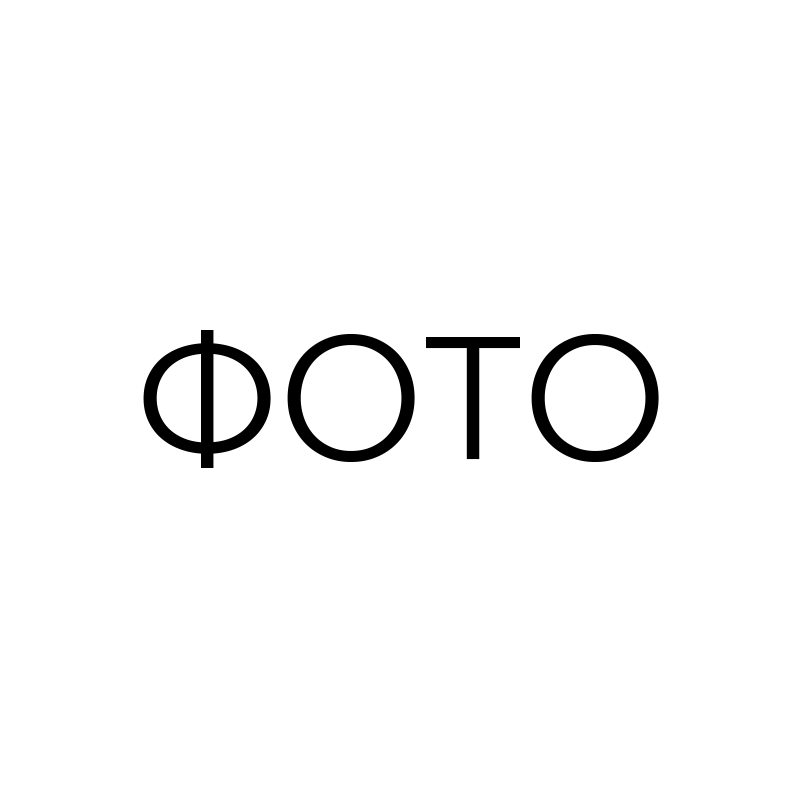
<style>
.page{position:relative;width:800px;height:800px;background:#ffffff}
.page>*{position:absolute;margin:0}
.t1{font:171.5px "AvenirNext-Regular";color:#000000}
</style>
<div class="page">
<p class="t1" style="left:143px;top:330px;width:516px;height:138px">ФОТО</p>
</div>
